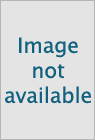
<style>
.page{position:relative;width:95px;height:140px;background:#e4e4e4}
.page>*{position:absolute;margin:0}
.t1{font:20.8px "LucidaSans";color:#12617f}
</style>
<div class="page">
<p class="t1" style="left:5px;top:37px;width:86px;height:67px;text-align:center">Image<br>not<br>available</p>
</div>
